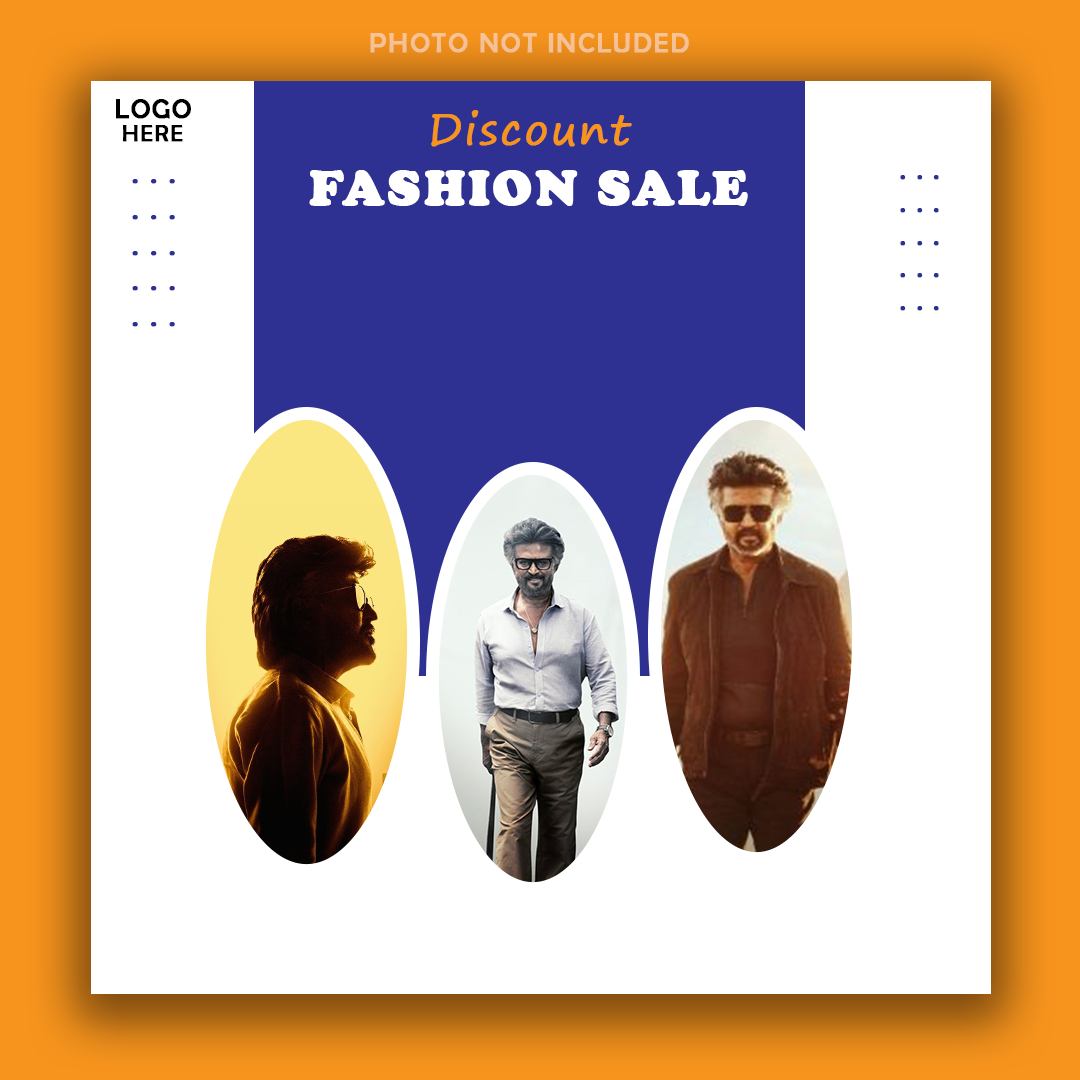
<style>
.page{position:relative;width:1080px;height:1080px;background:#ffffff}
.page>*{position:absolute;margin:0}
.t1{font:27.4px "BerlinSansFB-Reg";letter-spacing:0.05em;color:#f5c295;font-weight:bold}
.t2{font:26.6px "BerlinSansFB-Reg";letter-spacing:0.05em;color:#000000;font-weight:bold}
.t3{font:41.5px "SegoePrint";letter-spacing:0.05em;color:#f7941d;font-weight:bold}
.t4{font:23.4px "BerlinSansFB-Reg";letter-spacing:0.05em;color:#000000;font-weight:bold}
.t5{font:50px "CooperBlack";letter-spacing:0.05em;color:#ffffff;font-weight:bold}
.t6{font:29.7px "BerlinSansFB-Reg";letter-spacing:0.05em;color:#2e3192;font-weight:bold}
.t7{font:27.2px "BerlinSansFB-Reg";letter-spacing:0.05em;color:#2e3192;font-weight:bold}
</style>
<div class="page">
<p class="t1" style="left:370px;top:33px;width:319px;height:20px">PHOTO NOT INCLUDED</p>
<p class="t2" style="left:116px;top:99px;width:75px;height:20px">LOGO</p>
<p class="t3" style="left:431px;top:110px;width:201px;height:37px">Discount</p>
<p class="t4" style="left:122px;top:125px;width:61px;height:17px">HERE</p>
<p class="t5" style="left:309px;top:170px;width:439px;height:36px">FASHION SALE</p>
<p class="t6" style="left:132px;top:179px;width:43px;height:148px;text-align:center">. . .<br>. . .<br>. . .<br>. . .<br>. . .</p>
<p class="t7" style="left:900px;top:175px;width:39px;height:136px;text-align:center">. . .<br>. . .<br>. . .<br>. . .<br>. . .</p>
</div>
